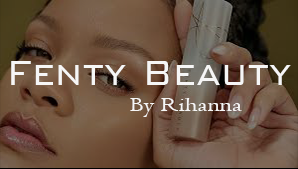
<style>
.page{position:relative;width:298px;height:169px}
.page>*{position:absolute;margin:0}
.t1{font:46.9px "BankGothicBT-Light";letter-spacing:0.01em;color:#f6f6f6;scale:0.85 1}
.t2{font:20.3px "Centaur";letter-spacing:0.01em;color:#f6f6f6;scale:1.28 1}
</style>
<div class="page">
<p class="t1" style="left:11px;top:61px;width:280px;height:24px">Fenty Beauty</p>
<p class="t2" style="left:130px;top:98px;width:112px;height:19px">By Rihanna</p>
</div>
